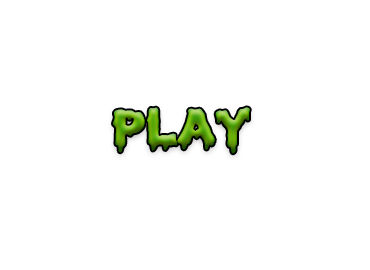
<style>
.page{position:relative;width:370px;height:270px;background:#ffffff}
.page>*{position:absolute;margin:0}
.t1{font:55px "Liquidismpart2"}
</style>
<div class="page">
<p class="t1" style="left:113px;top:107px;width:137px;height:47px">PLAY</p>
</div>
